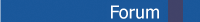
<style>
.page{position:relative;width:200px;height:22px;background:#1b589b}
.page>*{position:absolute;margin:0}
.t1{font:18px "Tahoma";color:#ffffff}
</style>
<div class="page">
<p class="t1" style="left:111px;top:5px;width:48px;height:14px">Forum</p>
</div>
